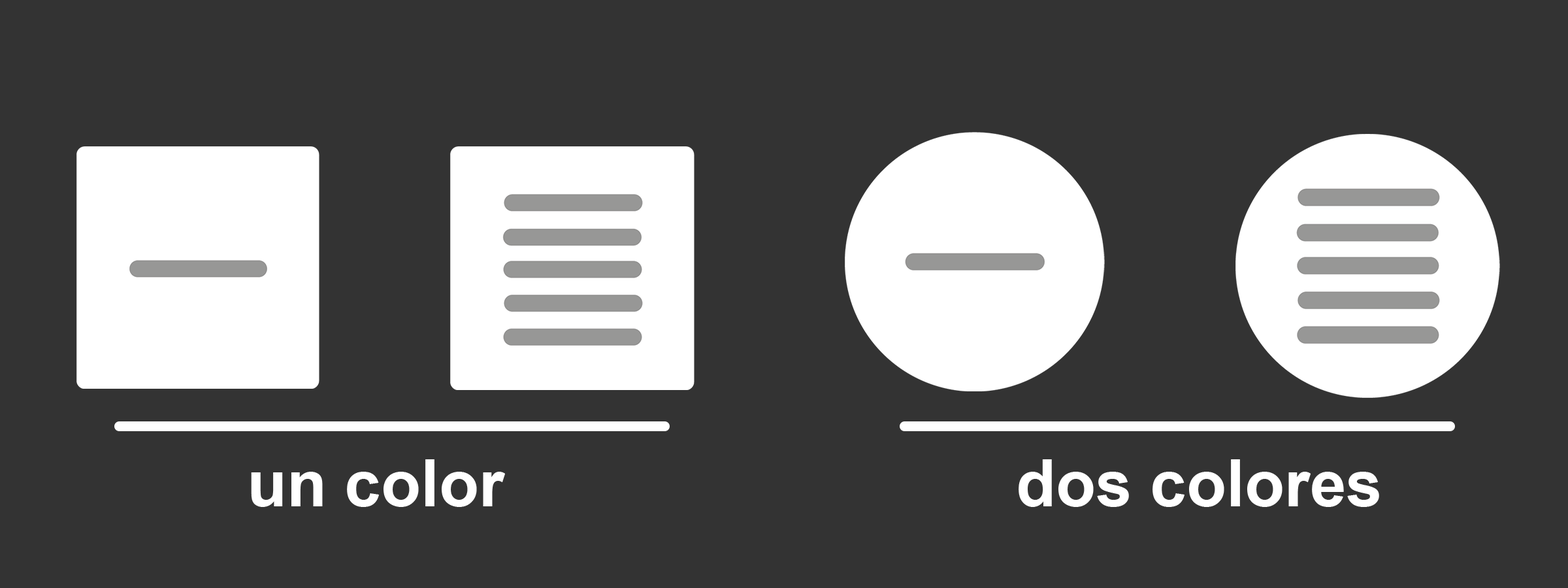
<style>
.page{position:relative;width:1568px;height:588px;background:#333333}
.page>*{position:absolute;margin:0}
.t1{font:65.3px "Arial-BoldMT";color:#ffffff}
</style>
<div class="page">
<p class="t1" style="left:251px;top:459px;width:254px;height:48px">un color</p>
<p class="t1" style="left:1019px;top:459px;width:360px;height:48px">dos colores</p>
</div>
